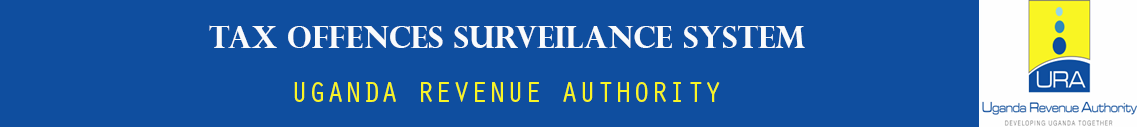
<style>
.page{position:relative;width:1137px;height:127px;background:#0f4e9f}
.page>*{position:absolute;margin:0}
.t1{font:30px "PerpetuaTitlingMT-Bold";color:#f9fbfc}
.t2{font:30px "OratorStd";color:#f9f523}
</style>
<div class="page">
<p class="t1" style="left:209px;top:25px;width:596px;height:23px">tax offences surveilance system</p>
<p class="t2" style="left:294px;top:82px;width:426px;height:20px">UGANDA REVENUE AUTHORITY</p>
</div>
